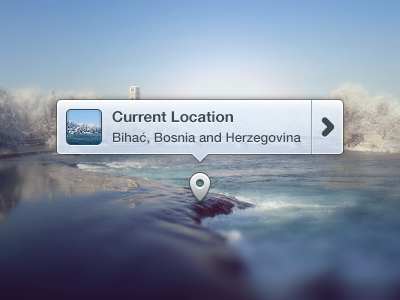
<style>
.page{position:relative;width:400px;height:300px}
.page>*{position:absolute;margin:0}
.t1{font:15px "HelveticaNeueLTCom-Bd";letter-spacing:0.003em;color:#3a4b52}
.t2{font:13px "HelveticaNeueLTCom-Md";letter-spacing:0.003em;color:#3a4b52}
</style>
<div class="page">
<p class="t1" style="left:112px;top:111px;width:121px;height:12px">Current Location</p>
<p class="t2" style="left:113px;top:132px;width:188px;height:13px">Bihać, Bosnia and Herzegovina</p>
</div>
